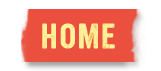
<style>
.page{position:relative;width:161px;height:71px;background:#eb503e}
.page>*{position:absolute;margin:0}
.t1{font:30px "Ultramagnetic";letter-spacing:0.025em;color:#fff29b;font-weight:bold}
</style>
<div class="page">
<p class="t1" style="left:42px;top:23px;width:73px;height:26px">HOME</p>
</div>
